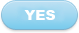
<style>
.page{position:relative;width:79px;height:33px}
.page>*{position:absolute;margin:0}
.t1{font:14px "Arial-Black";color:#ffffff}
</style>
<div class="page">
<p class="t1" style="left:24px;top:10px;width:31px;height:10px">YES</p>
</div>
